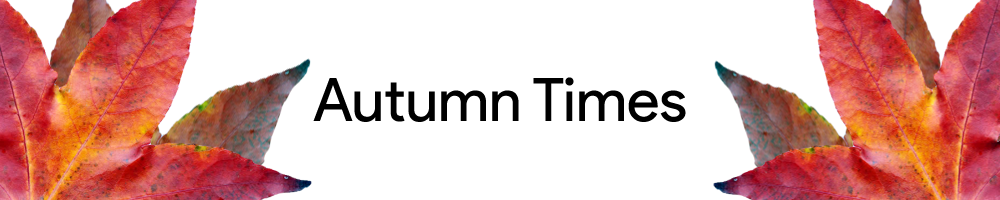
<style>
.page{position:relative;width:1000px;height:200px;background:#ffffff}
.page>*{position:absolute;margin:0}
.t1{font:59.9px "ProductSans-Regular";color:#000000}
</style>
<div class="page">
<p class="t1" style="left:313px;top:77px;width:373px;height:45px">Autumn Times</p>
</div>
